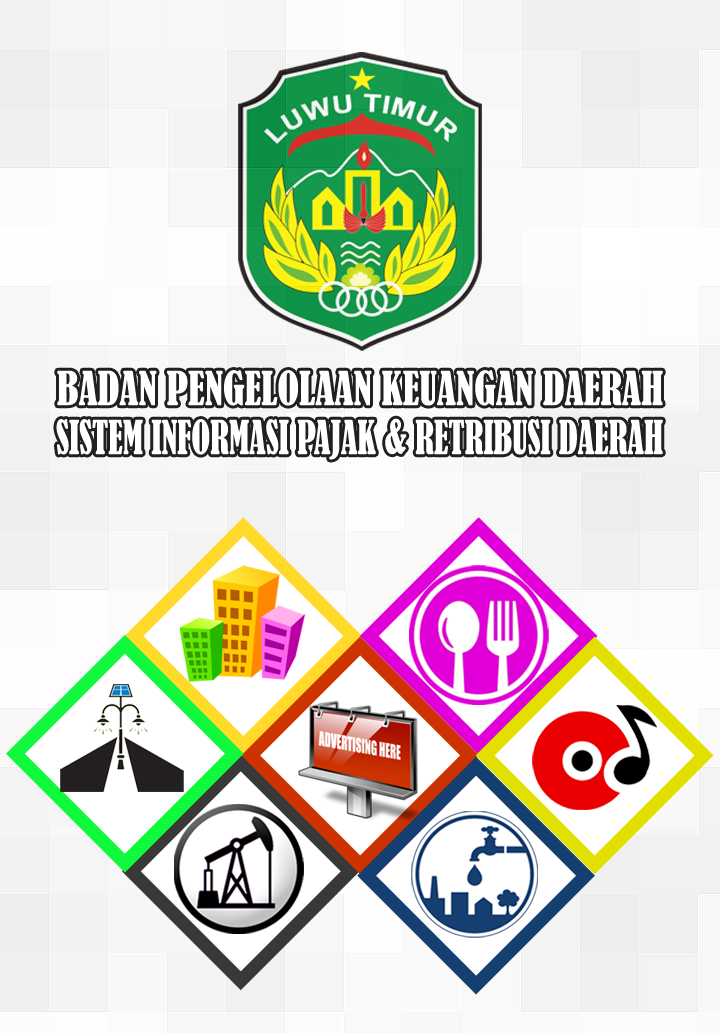
<style>
.page{position:relative;width:720px;height:1033px}
.page>*{position:absolute;margin:0}
.t1{font:43.4px "BernardMT-Condensed";color:#ffffff;scale:0.92 1}
.t2{font:43.4px "BernardMT-Condensed";color:#ffffff;scale:0.8 1}
</style>
<div class="page">
<p class="t1" style="left:57px;top:370px;width:606px;height:36px">BADAN PENGELOLAAN KEUANGAN DAERAH</p>
<p class="t2" style="left:56px;top:418px;width:607px;height:42px">SISTEM INFORMASI PAJAK &amp; RETRIBUSI DAERAH</p>
</div>
